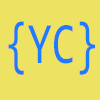
<style>
.page{position:relative;width:100px;height:100px;background:#eee263}
.page>*{position:absolute;margin:0}
.t1{font:58.7px "Consolas";color:#1b7cfe;scale:0.72 1}
</style>
<div class="page">
<p class="t1" style="left:8px;top:21px;width:87px;height:54px">{YC}</p>
</div>
